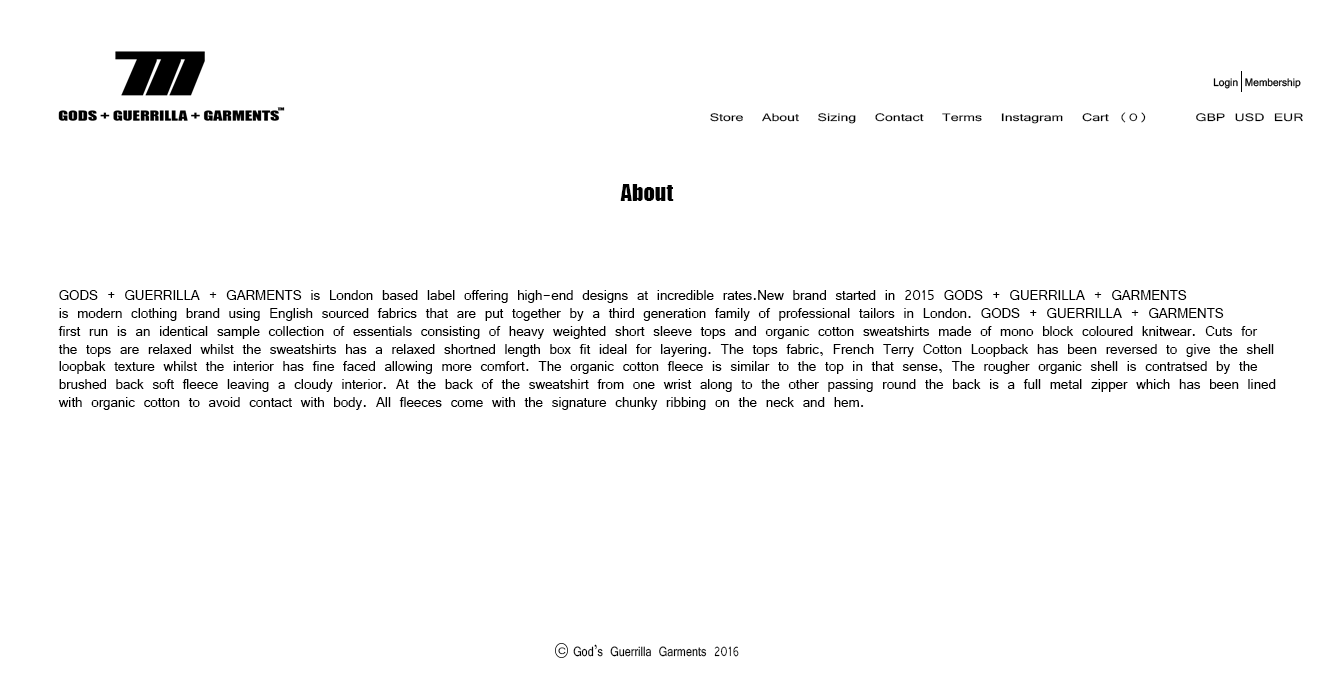
<style>
.page{position:relative;width:1332px;height:683px;background:#ffffff}
.page>*{position:absolute;margin:0}
.t1{font:11.7px "Vrinda";color:#000000;scale:1.35 1}
.t2{font:22.2px "Impact";color:#000000}
.t3{font:14.8px "Vrinda";color:#000000}
.t4{font:10px "Vrinda";scale:1.24 1}
.t5{font:14.6px "Vrinda";color:#000000;scale:0.83 1}
</style>
<div class="page">
<p class="t1" style="left:710px;top:112px;width:593px;height:12px">Store  About  Sizing  Contact  Terms  Instagram  Cart (0)     GBP USD EUR</p>
<p class="t2" style="left:620px;top:184px;width:54px;height:17px">About</p>
<p class="t3" style="left:58px;top:290px;width:1218px;height:120px">GODS + GUERRILLA + GARMENTS is London based label offering high-end designs at incredible rates.New brand started in 2015 GODS + GUERRILLA + GARMENTS <br>is modern clothing brand using English sourced fabrics that are put together by a third generation family of professional tailors in London. GODS + GUERRILLA + GARMENTS<br>first run is an identical sample collection of essentials consisting of heavy weighted short sleeve tops and organic cotton sweatshirts made of mono block coloured knitwear. Cuts for<br>the tops are relaxed whilst the sweatshirts has a relaxed shortned length box fit ideal for layering. The tops fabric, French Terry Cotton Loopback has been reversed to give the shell<br>loopbak texture whilst the interior has fine faced allowing more comfort. The organic cotton fleece is similar to the top in that sense, The rougher organic shell is contratsed by the<br>brushed back soft fleece leaving a cloudy interior. At the back of the sweatshirt from one wrist along to the other passing round the back is a full metal zipper which has been lined<br>with organic cotton to avoid contact with body. All fleeces come with the signature chunky ribbing on the neck and hem.</p>
<p class="t4" style="left:558px;top:647px;width:8px;height:8px">C</p>
<p class="t5" style="left:573px;top:644px;width:166px;height:13px">God’s Guerrilla Garments 2016</p>
</div>
